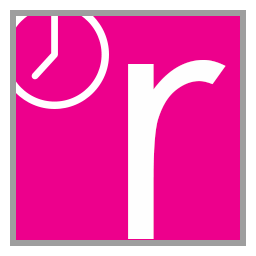
<style>
.page{position:relative;width:256px;height:256px;background:#ed008c}
.page>*{position:absolute;margin:0}
.t1{font:328.6px "CenturyGothic";color:#fefefe;scale:1.1 1}
</style>
<div class="page">
<p class="t1" style="left:128px;top:60px;width:98px;height:179px">r</p>
</div>
